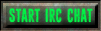
<style>
.page{position:relative;width:101px;height:31px}
.page>*{position:absolute;margin:0}
.t1{font:19px "Sunzoomspark";color:#00f646}
</style>
<div class="page">
<p class="t1" style="left:9px;top:8px;width:84px;height:15px">START IRC CHAT</p>
</div>
